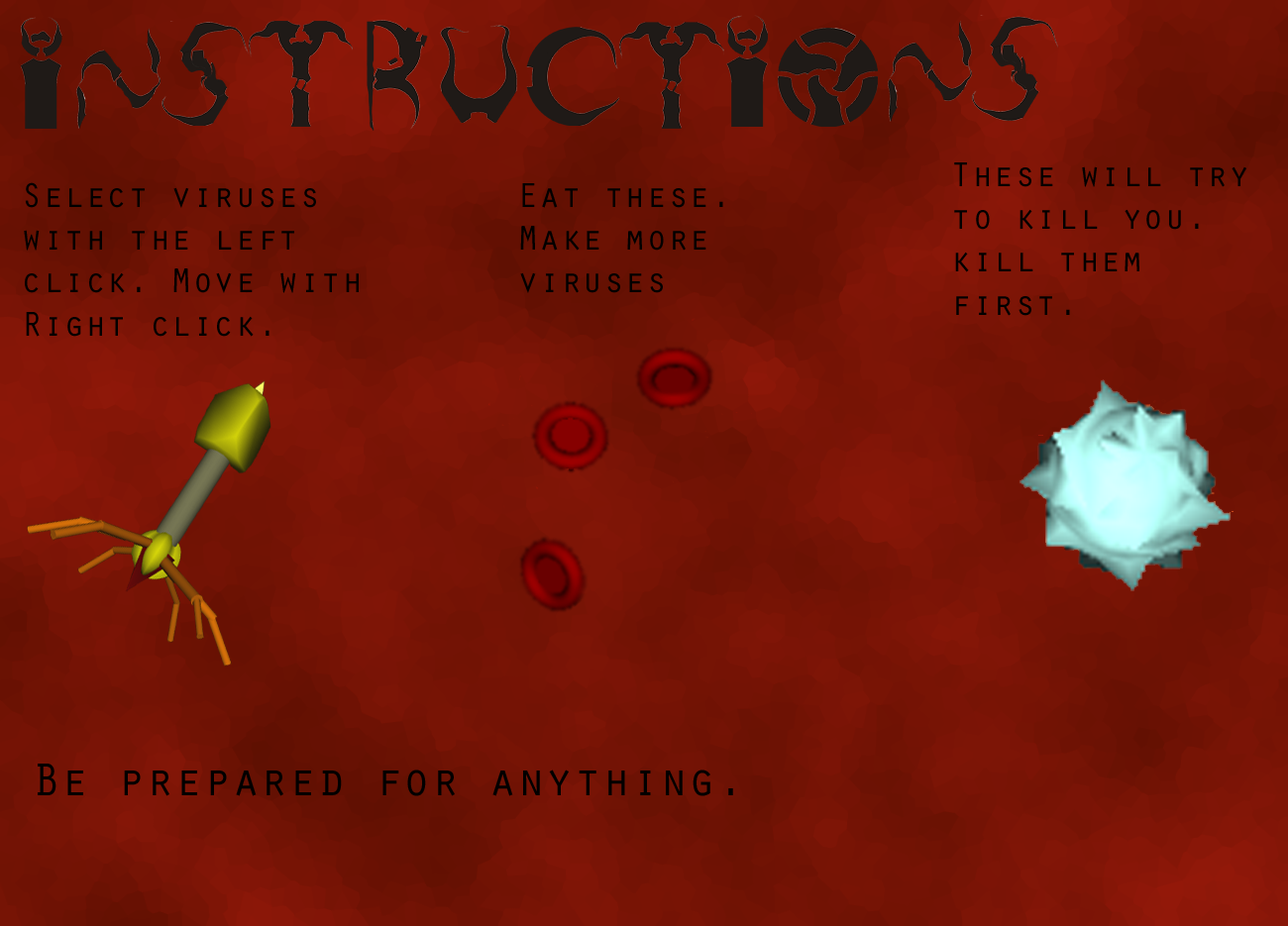
<style>
.page{position:relative;width:1288px;height:926px}
.page>*{position:absolute;margin:0}
.t1{font:35.7px "OratorStd";color:#000000}
.t2{font:47.5px "OratorStd";color:#000000}
</style>
<div class="page">
<p class="t1" style="left:954px;top:162px;width:292px;height:154px">These will try to kill you. kill them first.</p>
<p class="t1" style="left:24px;top:182px;width:335px;height:155px">Select viruses with the left click. Move with Right click.</p>
<p class="t1" style="left:520px;top:183px;width:203px;height:110px">Eat these.<br>Make more viruses</p>
<p class="t2" style="left:38px;top:764px;width:695px;height:32px">Be prepared for anything.</p>
</div>
